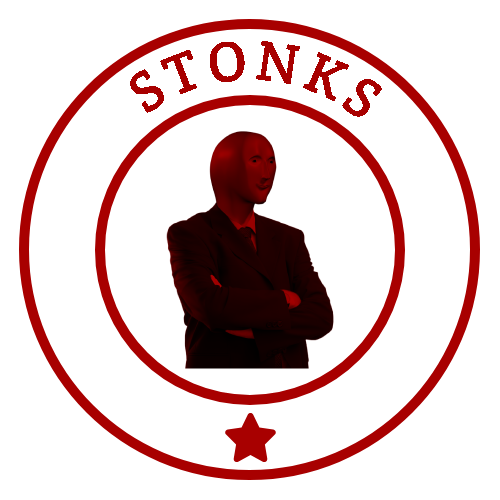
<style>
.page{position:relative;width:500px;height:500px;background:#ffffff}
.page>*{position:absolute;margin:0}
.t1{font:57px "CreteRound-Regular";letter-spacing:-0.005em;color:#a80000}
.t2{font:57px "Coustard-Regular";letter-spacing:0.1em;color:#a80000}
</style>
<div class="page">
<p class="t1" style="left:128px;top:40px;width:254px;height:79px"><span class="t2">            </span>STONKS</p>
</div>
